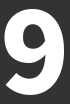
<style>
.page{position:relative;width:70px;height:104px;background:#333333}
.page>*{position:absolute;margin:0}
.t1{font:130.9px "SourceSansPro-Bold";letter-spacing:-0.05em;color:#ffffff}
</style>
<div class="page">
<p class="t1" style="left:4px;top:9px;width:60px;height:86px">9</p>
</div>
